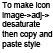
<style>
.page{position:relative;width:53px;height:53px;background:#ffffff}
.page>*{position:absolute;margin:0}
.t1{font:8px "ArialMT";color:#000000}
</style>
<div class="page">
<p class="t1" style="left:2px;top:2px;width:51px;height:47px">To make icon<br>image-&gt;adj-&gt;<br>desaturate<br>then copy and<br>paste style</p>
</div>
